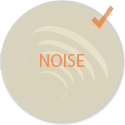
<style>
.page{position:relative;width:125px;height:125px;background:#d9d3bc}
.page>*{position:absolute;margin:0}
.t1{font:18px "MyriadPro-Regular";color:#ed915f}
</style>
<div class="page">
<p class="t1" style="left:40px;top:54px;width:45px;height:13px">NOISE</p>
</div>
